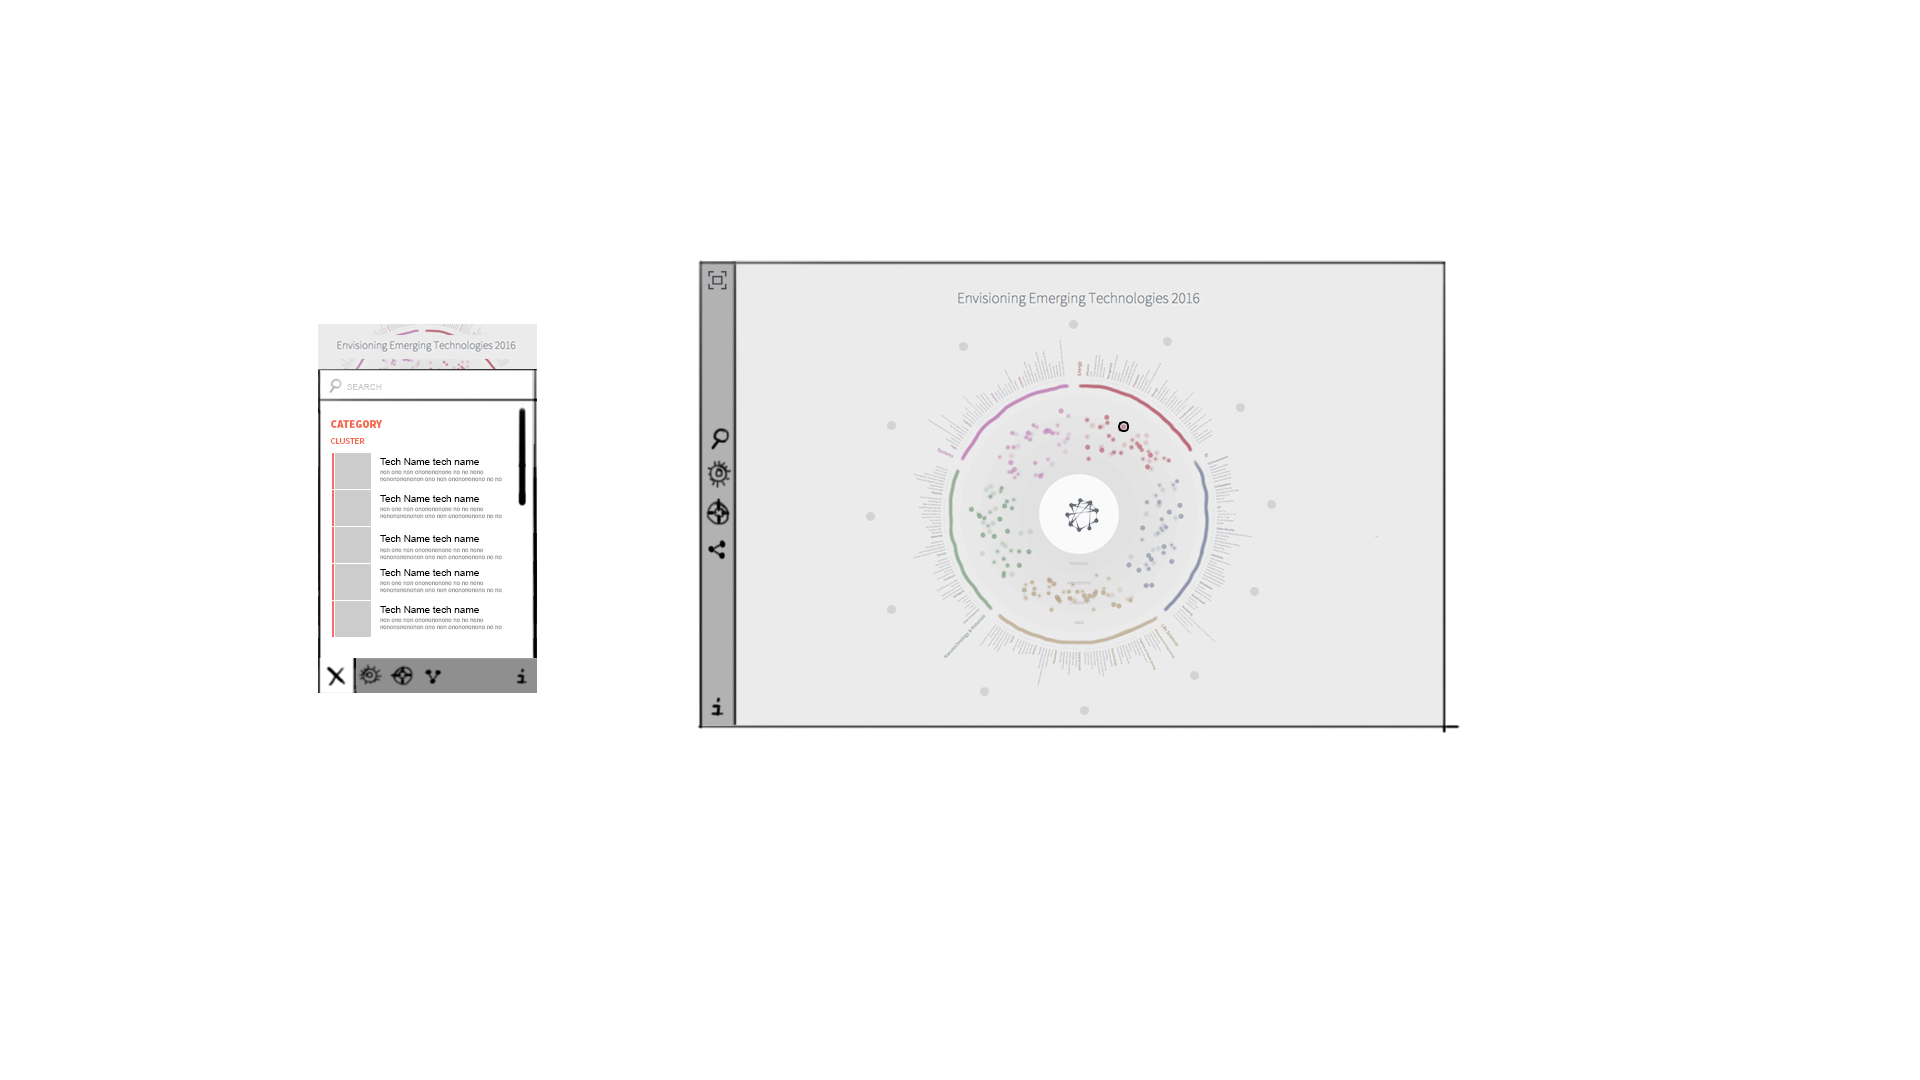
<style>
.page{position:relative;width:1920px;height:1080px;background:#ffffff}
.page>*{position:absolute;margin:0}
.t1{font:8.4px "ArialMT";color:#cacaca}
.t2{font:10.8px "SourceSansPro-Black";color:#f26649}
.t3{font:9px "SourceSansPro-Regular";color:#f26649}
.t4{font:9.9px "ArialMT";color:#000000}
.t5{font:6px "ArialMT";color:#a3a3a3}
</style>
<div class="page">
<p class="t1" style="left:347px;top:384px;width:35px;height:6px">SEARCH</p>
<p class="t2" style="left:331px;top:420px;width:52px;height:8px">CATEGORY</p>
<p class="t3" style="left:330px;top:438px;width:35px;height:6px">CLUSTER</p>
<p class="t4" style="left:380px;top:458px;width:99px;height:7px">Tech Name tech name</p>
<p class="t5" style="left:380px;top:470px;width:122px;height:12px">non ono non ononononono no no nono nonononononon ono non ononononono no no</p>
<p class="t4" style="left:380px;top:495px;width:99px;height:7px">Tech Name tech name</p>
<p class="t5" style="left:380px;top:507px;width:122px;height:12px">non ono non ononononono no no nono nonononononon ono non ononononono no no</p>
<p class="t4" style="left:380px;top:535px;width:99px;height:7px">Tech Name tech name</p>
<p class="t5" style="left:380px;top:548px;width:122px;height:12px">non ono non ononononono no no nono nonononononon ono non ononononono no no</p>
<p class="t4" style="left:380px;top:569px;width:99px;height:7px">Tech Name tech name</p>
<p class="t5" style="left:380px;top:581px;width:122px;height:12px">non ono non ononononono no no nono nonononononon ono non ononononono no no</p>
<p class="t4" style="left:380px;top:606px;width:99px;height:7px">Tech Name tech name</p>
<p class="t5" style="left:380px;top:618px;width:122px;height:12px">non ono non ononononono no no nono nonononononon ono non ononononono no no</p>
</div>
